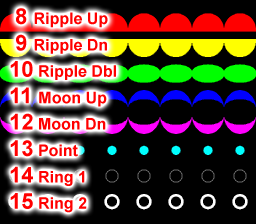
<style>
.page{position:relative;width:256px;height:224px;background:#000000}
.page>*{position:absolute;margin:0}
.t1{font:16px "Arial-BoldMT";color:#ff0000}
.t2{font:22px "Arial-BoldMT";color:#ff0000}
</style>
<div class="page">
<p class="t1" style="left:10px;top:8px;width:106px;height:205px"><span class="t2"> 8 </span>Ripple Up<br><span class="t2"> 9 </span>Ripple Dn<br><span class="t2">10</span> Ripple Dbl<br><span class="t2">11 </span>Moon Up<br><span class="t2">12</span> Moon Dn<br><span class="t2">13</span> Point<br><span class="t2">14</span> Ring 1<br><span class="t2">15</span> Ring 2</p>
</div>
